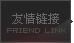
<style>
.page{position:relative;width:74px;height:43px}
.page>*{position:absolute;margin:0}
.t1{font:12px "SimSun";color:#666666}
.t2{font:8px "04b08";color:#484848}
</style>
<div class="page">
<p class="t1" style="left:12px;top:13px;width:47px;height:11px">友情链接</p>
<p class="t2" style="left:7px;top:28px;width:59px;height:5px">Friend Link</p>
</div>
